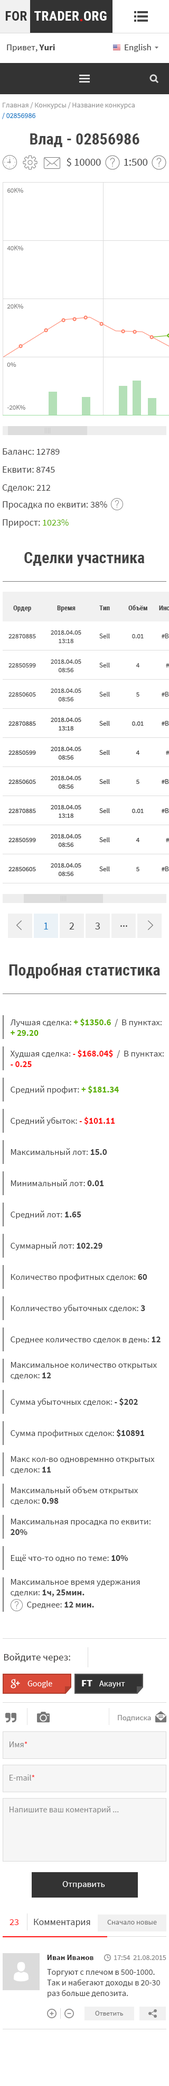
<style>
.page{position:relative;width:169px;height:2086px;background:#ffffff}
.page>*{position:absolute;margin:0}
.t1{font:7.4px/10.6px "SourceSansPro-Regular";color:#999999}
.t2{font:7.4px/10.6px "SourceSansPro-Regular";color:#167ac6}
.t3{font:15.9px "RobotoCondensed-Bold";color:#444444}
.t4{font:11.1px "SourceSansPro-Regular";color:#454444;text-transform:uppercase}
.t5{font:6.9px "SourceSansPro-Regular";color:#858585;text-transform:uppercase}
.t6{font:9.5px "SourceSansPro-Regular";color:#454444}
.t7{font:9.5px "SourceSansPro-Regular";color:#5bb000}
.t8{font:6.9px "RobotoCondensed-Bold";color:#444444}
.t9{font:6.9px "SourceSansPro-Regular";color:#444444}
.t10{font:6.9px/8.5px "SourceSansPro-Regular";color:#444444}
.t11{font:10.6px "SourceSansPro-Regular";color:#167ac6}
.t12{font:10.6px "SourceSansPro-Regular";color:#444444}
.t13{font:9px/10.6px "SourceSansPro-Regular";color:#444444}
.t14{font:9px/10.6px "SourceSansPro-Bold";color:#5bb000}
.t15{font:9px/10.6px "SourceSansPro-Bold";color:#ff1616}
.t16{font:9px "SourceSansPro-Regular";color:#444444}
.t17{font:9px "SourceSansPro-Bold";color:#5bb000}
.t18{font:9px "SourceSansPro-Bold";color:#ff1616}
.t19{font:9px "SourceSansPro-Bold";color:#444444}
.t20{font:9px/10.6px "SourceSansPro-Bold";color:#444444}
.t21{font:10.1px "SourceSansPro-Regular";color:#333131}
.t22{font:8.5px "SourceSansPro-Regular";color:#ffffff}
.t23{font:10.1px "SourceSansPro-Black";color:#ffffff}
.t24{font:7.9px "SourceSansPro-Regular";color:#858585}
.t25{font:8.5px "SourceSansPro-Regular";color:#858585}
.t26{font:8.5px "SourceSansPro-Regular";color:#ff1616}
.t27{font:9px "SourceSansPro-Regular";color:#ffffff}
.t28{font:9.5px "SourceSansPro-Regular";color:#ff1616;text-transform:uppercase}
.t29{font:9.5px "SourceSansPro-Regular";color:#444444}
.t30{font:7.4px "SourceSansPro-Regular";color:#787878}
.t31{font:7.9px "SourceSansPro-Bold";color:#333030}
.t32{font:7.4px "SourceSansPro-Regular";color:#858585}
.t33{font:8.5px/10.6px "SourceSansPro-Regular";color:#444444}
.t34{font:6.9px "SourceSansPro-Regular";color:#787878}
</style>
<div class="page">
<p class="t1" style="left:2px;top:102px;width:133px;height:17px">Главная / Конкурсы / Название конкурса<span class="t2"><br>/ 02856986</span></p>
<p class="t3" style="left:30px;top:133px;width:110px;height:14px">Влад - 02856986</p>
<p class="t4" style="left:67px;top:158px;width:34px;height:9px">$ 10000</p>
<p class="t4" style="left:124px;top:159px;width:24px;height:7px">1:500</p>
<p class="t5" style="left:7px;top:188px;width:16px;height:5px">60k%</p>
<p class="t5" style="left:7px;top:246px;width:16px;height:4px">40k%</p>
<p class="t5" style="left:7px;top:304px;width:16px;height:5px">20k%</p>
<p class="t5" style="left:7px;top:362px;width:9px;height:5px">0%</p>
<p class="t5" style="left:7px;top:405px;width:18px;height:5px">-20k%</p>
<p class="t6" style="left:3px;top:448px;width:57px;height:7px">Баланс: 12789</p>
<p class="t6" style="left:3px;top:466px;width:52px;height:7px">Еквити: 8745</p>
<p class="t6" style="left:2px;top:484px;width:49px;height:8px">Сделок: 212</p>
<p class="t6" style="left:3px;top:501px;width:104px;height:9px">Просадка по еквити: 38%</p>
<p class="t6" style="left:3px;top:519px;width:66px;height:9px">Прирост: <span class="t7">1023%</span></p>
<p class="t3" style="left:24px;top:552px;width:121px;height:14px">Сделки участника</p>
<p class="t8" style="left:13px;top:606px;width:18px;height:6px">Ордер</p>
<p class="t8" style="left:57px;top:606px;width:19px;height:6px">Время</p>
<p class="t8" style="left:100px;top:606px;width:10px;height:4px">Тип</p>
<p class="t8" style="left:129px;top:605px;width:19px;height:5px">Объём</p>
<p class="t9" style="left:8px;top:634px;width:28px;height:4px">22870885</p>
<p class="t10" style="left:51px;top:631px;width:31px;height:12px;text-align:center">2018.04.05<br>13:18</p>
<p class="t9" style="left:100px;top:634px;width:10px;height:4px">Sell</p>
<p class="t9" style="left:132px;top:634px;width:12px;height:4px">0.01</p>
<p class="t9" style="left:8px;top:663px;width:28px;height:5px">22850599</p>
<p class="t10" style="left:51px;top:660px;width:31px;height:12px;text-align:center">2018.04.05<br>08:56</p>
<p class="t9" style="left:100px;top:663px;width:10px;height:5px">Sell</p>
<p class="t9" style="left:136px;top:663px;width:4px;height:5px">4</p>
<p class="t10" style="left:51px;top:689px;width:31px;height:12px;text-align:center">2018.04.05<br>08:56</p>
<p class="t9" style="left:8px;top:692px;width:28px;height:5px">22850605</p>
<p class="t9" style="left:100px;top:692px;width:10px;height:5px">Sell</p>
<p class="t9" style="left:137px;top:692px;width:3px;height:5px">5</p>
<p class="t11" style="left:44px;top:923px;width:4px;height:7px">1</p>
<p class="t12" style="left:69px;top:923px;width:6px;height:7px">2</p>
<p class="t12" style="left:95px;top:923px;width:5px;height:7px">3</p>
<p class="t12" style="left:121px;top:925px;width:7px;height:2px">...</p>
<p class="t3" style="left:9px;top:964px;width:151px;height:15px">Подробная статистика</p>
<p class="t13" style="left:10px;top:1019px;width:152px;height:17px">Лучшая сделка: <span class="t14">+ $1350.6</span>  /  В пунктах:<br><span class="t14">+ 29.20</span></p>
<p class="t13" style="left:10px;top:1050px;width:154px;height:17px">Худшая сделка: <span class="t15">- $168.04$ </span> /  В пунктах:<br><span class="t15">- 0.25</span></p>
<p class="t16" style="left:11px;top:1086px;width:108px;height:8px">Средний профит: <span class="t17">+ $181.34</span></p>
<p class="t16" style="left:11px;top:1117px;width:104px;height:9px">Средний убыток: <span class="t18">- $101.11</span></p>
<p class="t16" style="left:11px;top:1148px;width:96px;height:7px">Максимальный лот: <span class="t19">15.0</span></p>
<p class="t16" style="left:11px;top:1180px;width:93px;height:6px">Минимальный лот: <span class="t19">0.01</span></p>
<p class="t16" style="left:11px;top:1211px;width:71px;height:8px">Средний лот: <span class="t19">1.65</span></p>
<p class="t16" style="left:11px;top:1242px;width:92px;height:8px">Суммарный лот: <span class="t19">102.29</span></p>
<p class="t16" style="left:11px;top:1274px;width:137px;height:8px">Количество профитных сделок: <span class="t19">60</span></p>
<p class="t16" style="left:11px;top:1304px;width:135px;height:9px">Колличество убыточных сделок: <span class="t19">3</span></p>
<p class="t16" style="left:11px;top:1337px;width:150px;height:7px">Среднее количество сделок в день: <span class="t19">12</span></p>
<p class="t13" style="left:11px;top:1362px;width:146px;height:18px">Максимальное количество открытых<br>сделок: <span class="t20">12</span></p>
<p class="t16" style="left:11px;top:1398px;width:127px;height:9px">Сумма убыточных сделок: <span class="t19">- $202</span></p>
<p class="t16" style="left:11px;top:1429px;width:134px;height:9px">Сумма профитных сделок: <span class="t19">$10891</span></p>
<p class="t13" style="left:11px;top:1456px;width:144px;height:18px">Макс кол-во одновремнно открытых<br>сделок: <span class="t20">11</span></p>
<p class="t13" style="left:11px;top:1487px;width:128px;height:18px">Максимальный объем открытых<br>сделок:<span class="t20"> 0.98</span></p>
<p class="t13" style="left:11px;top:1519px;width:140px;height:16px">Максимальная просадка по еквити:<br><span class="t20">20%</span></p>
<p class="t16" style="left:11px;top:1555px;width:117px;height:7px">Ещё что-то одно по теме: <span class="t19">10%</span></p>
<p class="t13" style="left:11px;top:1579px;width:129px;height:18px">Максимальное время удержания<br>сделки: <span class="t20">1ч, 25мин.</span></p>
<p class="t16" style="left:27px;top:1602px;width:67px;height:7px">Среднее: <span class="t19">12 мин.</span></p>
<p class="t21" style="left:4px;top:1653px;width:66px;height:10px">Войдите через:</p>
<p class="t22" style="left:28px;top:1681px;width:24px;height:7px">Google</p>
<p class="t23" style="left:82px;top:1680px;width:11px;height:7px">FT</p>
<p class="t22" style="left:100px;top:1681px;width:25px;height:7px">Акаунт</p>
<p class="t24" style="left:118px;top:1715px;width:33px;height:7px">Подписка</p>
<p class="t25" style="left:10px;top:1742px;width:18px;height:6px">Имя<span class="t26">*</span></p>
<p class="t25" style="left:10px;top:1775px;width:25px;height:6px">E-mail<span class="t26">*</span></p>
<p class="t25" style="left:10px;top:1806px;width:109px;height:8px">Напишите ваш коментарий ...</p>
<p class="t27" style="left:62px;top:1882px;width:43px;height:7px">Отправить</p>
<p class="t28" style="left:10px;top:1920px;width:9px;height:5px">23</p>
<p class="t29" style="left:34px;top:1919px;width:57px;height:9px">Комментария</p>
<p class="t30" style="left:107px;top:1920px;width:50px;height:5px">Сначало новые</p>
<p class="t31" style="left:47px;top:1955px;width:47px;height:5px">Иван Иванов</p>
<p class="t32" style="left:114px;top:1956px;width:53px;height:4px">17:54  21.08.2015</p>
<p class="t33" style="left:47px;top:1969px;width:113px;height:29px">Торгуют с плечом в 500-1000. Так и набегают доходы в 20-30 раз больше депозита.</p>
<p class="t34" style="left:95px;top:2011px;width:28px;height:5px">Ответить</p>
</div>
